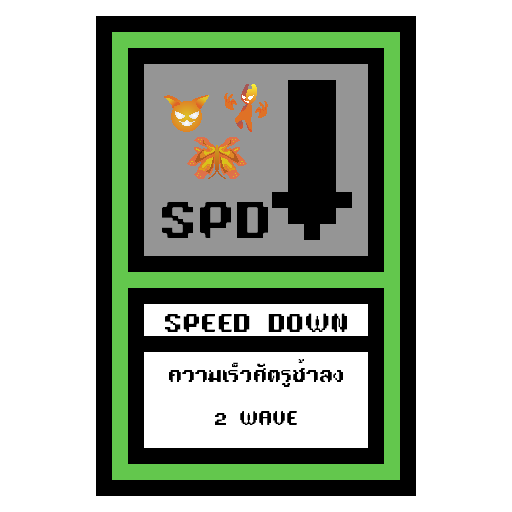
<style>
.page{position:relative;width:512px;height:512px;background:#ffffff}
.page>*{position:absolute;margin:0}
.t1{font:48px "TA16BIT-Regular";color:#000000}
.t2{font:24px "TA16BIT-Regular";color:#000000}
.t3{font:18px "TA16BIT-Regular";color:#000000}
</style>
<div class="page">
<p class="t1" style="left:162px;top:202px;width:106px;height:36px">SPD</p>
<p class="t2" style="left:165px;top:313px;width:182px;height:19px">SPEED DOWN</p>
<p class="t3" style="left:169px;top:359px;width:174px;height:66px;text-align:center">ความเร็วศัตรูช้าลง<br><br>2 WAVE</p>
</div>
